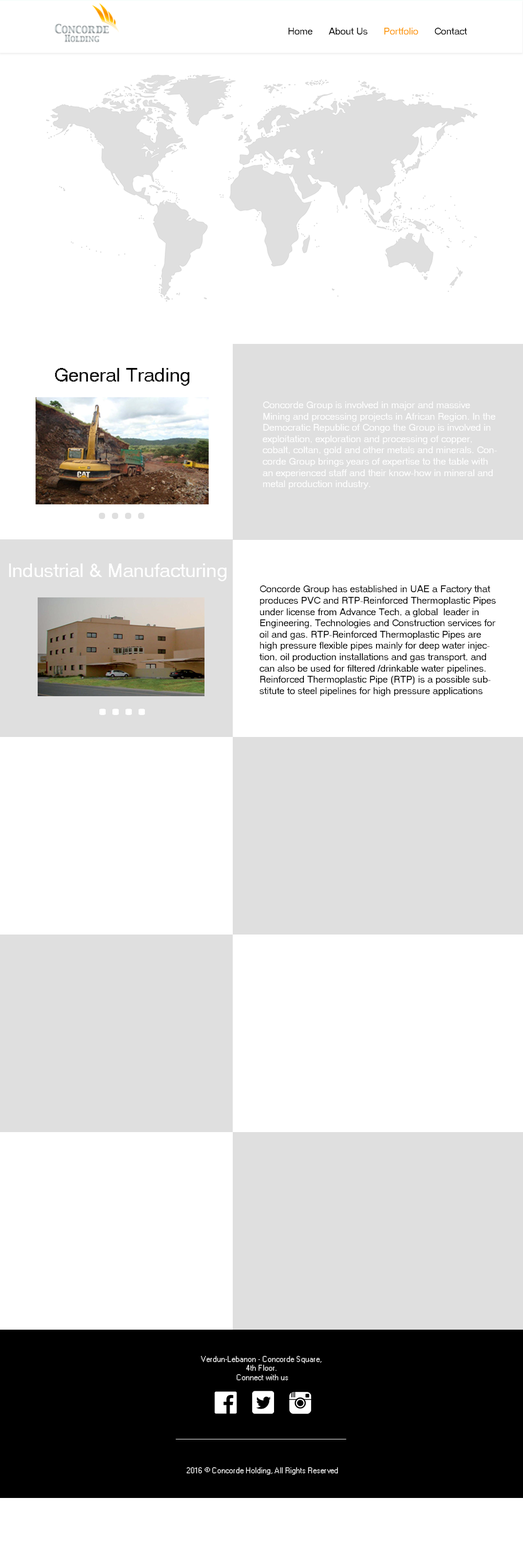
<style>
.page{position:relative;width:523px;height:1568px;background:#ffffff}
.page>*{position:absolute;margin:0}
.t1{font:18.8px "MS Sans Serif";color:#000000}
.t2{font:9.4px "MS Sans Serif";color:#ffffff}
.t3{font:18.8px "MS Sans Serif";color:#ffffff}
.t4{font:9.4px "MS Sans Serif";color:#000000}
</style>
<div class="page">
<p class="t1" style="left:55px;top:368px;width:134px;height:18px">General Trading</p>
<p class="t2" style="left:262px;top:401px;width:235px;height:88px">Concorde Group is involved in major and massive Mining and processing projects in African Region. In the Democratic Republic of Congo the Group is involved in exploitation, exploration and processing of copper, cobalt, coltan, gold and other metals and minerals. Concorde Group brings years of expertise to the table with an experienced staff and their know-how in mineral and metal production industry.</p>
<p class="t3" style="left:9px;top:563px;width:217px;height:18px">Industrial &amp; Manufacturing</p>
<p class="t4" style="left:259px;top:585px;width:236px;height:111px">Concorde Group has established in UAE a Factory that produces PVC and RTP-Reinforced Thermoplastic Pipes under license from Advance Tech, a global  leader in Engineering, Technologies and Construction services for oil and gas. RTP-Reinforced Thermoplastic Pipes are high pressure flexible pipes mainly for deep water injection, oil production installations and gas transport, and can also be used for filtered /drinkable water pipelines. Reinforced Thermoplastic Pipe (RTP) is a possible substitute to steel pipelines for high pressure applications</p>
</div>
